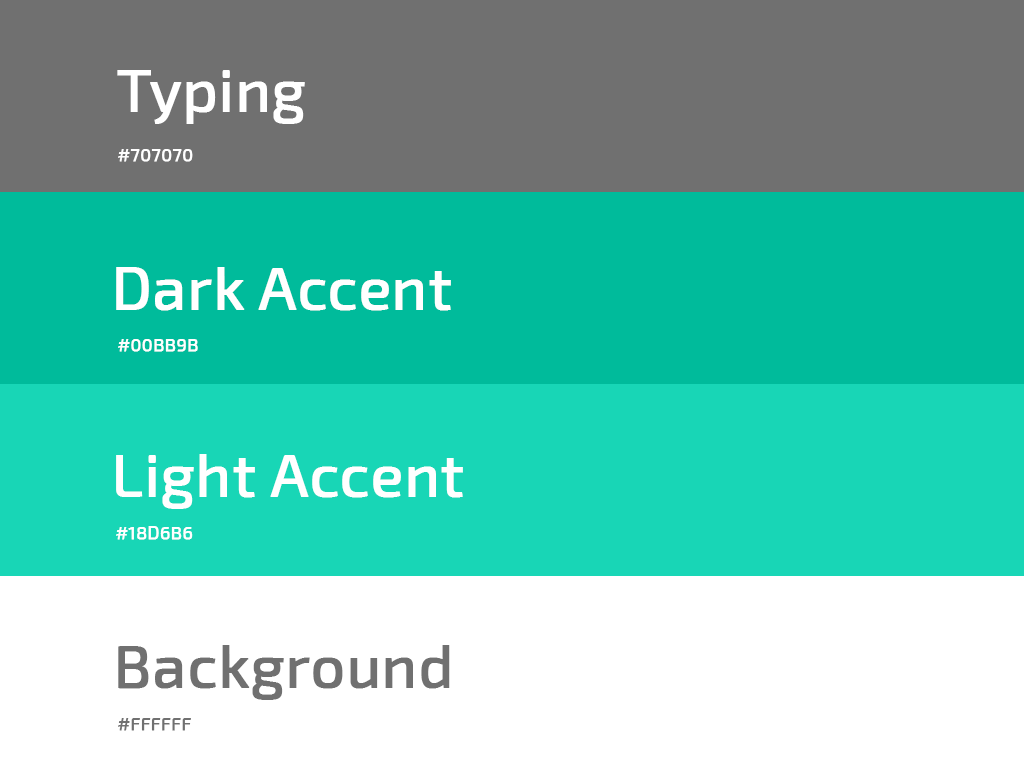
<style>
.page{position:relative;width:1024px;height:768px;background:#ffffff}
.page>*{position:absolute;margin:0}
.t1{font:60px "Exo2-Regular";color:#ffffff;font-weight:bold}
.t2{font:18px "Exo2-Regular";color:#ffffff;font-weight:bold}
.t3{font:60px "Exo2-Regular";color:#707070;font-weight:bold}
.t4{font:18px "Exo2-Regular";color:#707070;font-weight:bold}
</style>
<div class="page">
<p class="t1" style="left:117px;top:70px;width:188px;height:54px">Typing</p>
<p class="t2" style="left:118px;top:149px;width:75px;height:13px">#707070</p>
<p class="t1" style="left:116px;top:267px;width:335px;height:44px">Dark Accent</p>
<p class="t2" style="left:118px;top:339px;width:80px;height:13px">#00BB9B</p>
<p class="t1" style="left:116px;top:454px;width:347px;height:55px">Light Accent</p>
<p class="t2" style="left:116px;top:526px;width:77px;height:14px">#18D6B6</p>
<p class="t3" style="left:118px;top:645px;width:332px;height:55px">Background</p>
<p class="t4" style="left:118px;top:718px;width:73px;height:13px">#FFFFFF</p>
</div>
